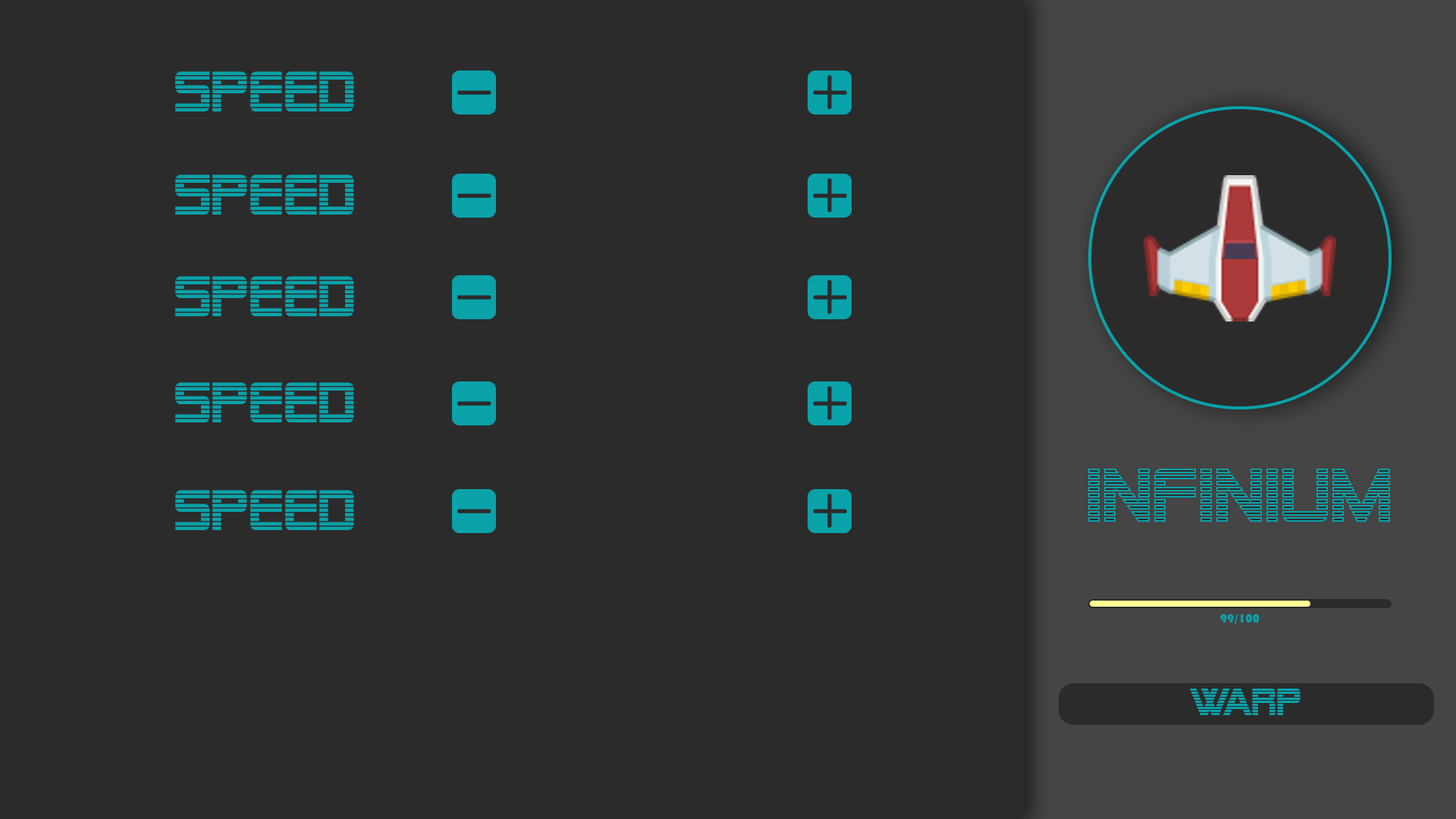
<style>
.page{position:relative;width:1456px;height:819px;background:#2b2b2b}
.page>*{position:absolute;margin:0}
.t1{font:56.9px "AlienEncounters";color:#09a2a9}
.t2{font:75.8px "AlienEncounters";color:#09a2a9}
.t3{font:12.3px "Bauhaus93";color:#09a2a9}
.t4{font:37.9px "AlienEncounters";color:#09a2a9}
</style>
<div class="page">
<p class="t1" style="left:175px;top:71px;width:179px;height:40px">Speed</p>
<p class="t1" style="left:175px;top:174px;width:179px;height:41px">Speed</p>
<p class="t1" style="left:175px;top:276px;width:179px;height:40px">Speed</p>
<p class="t1" style="left:175px;top:382px;width:179px;height:40px">Speed</p>
<p class="t2" style="left:1088px;top:469px;width:302px;height:53px">Infinium</p>
<p class="t1" style="left:175px;top:490px;width:179px;height:40px">Speed</p>
<p class="t3" style="left:1220px;top:614px;width:40px;height:10px">99/100</p>
<p class="t4" style="left:1190px;top:689px;width:111px;height:26px">Warp</p>
</div>
